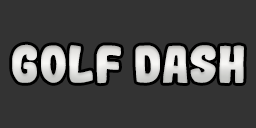
<style>
.page{position:relative;width:256px;height:128px;background:#333333}
.page>*{position:absolute;margin:0}
.t1{font:50px "Gogono-Cocoa-Mochi";color:#dfdfdd}
</style>
<div class="page">
<p class="t1" style="left:12px;top:44px;width:232px;height:40px">Golf Dash</p>
</div>
